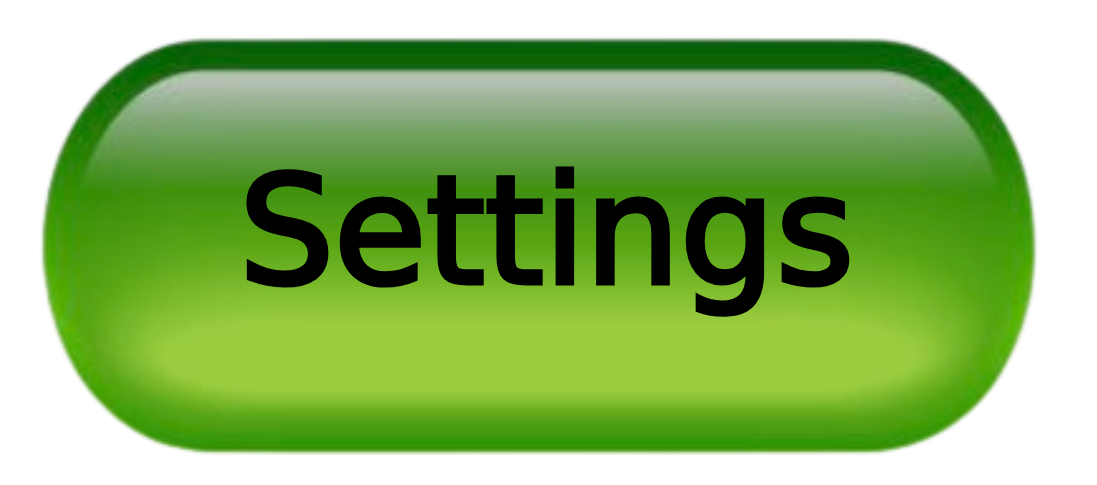
<style>
.page{position:relative;width:1097px;height:485px;background:#ffffff}
.page>*{position:absolute;margin:0}
.t1{font:150px "DejaVuSans";color:#000000}
</style>
<div class="page">
<p class="t1" style="left:243px;top:164px;width:609px;height:156px">Settings</p>
</div>
